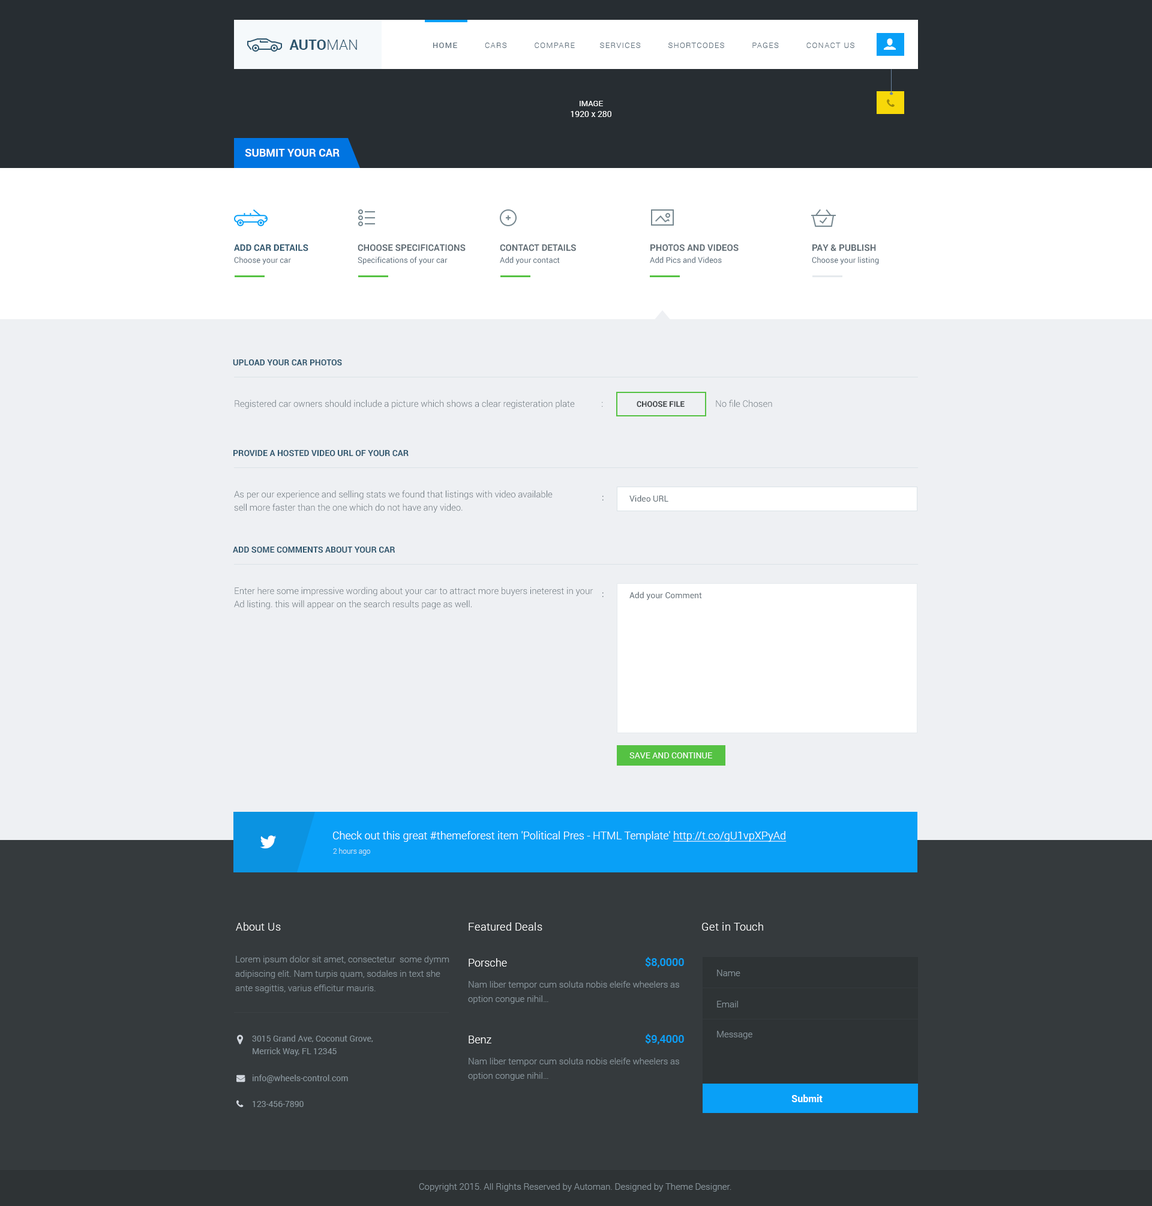
<style>
.page{position:relative;width:1152px;height:1206px;background:#eef0f3}
.page>*{position:absolute;margin:0}
.t1{font:14.4px "Roboto-Bold";color:#2e566e;text-transform:uppercase}
.t2{font:14.4px "Roboto-Light";color:#2e566e;text-transform:uppercase}
.t3{font:7.8px "Roboto-Light";letter-spacing:0.1em;color:#5d6e7b;text-transform:uppercase}
.t4{font:7.8px "Roboto-Regular";letter-spacing:0.1em;color:#5d6e7b;text-transform:uppercase}
.t5{font:8.4px/10.8px "Roboto-Regular";color:#ffffff}
.t6{font:7.8px/10.8px "Roboto-Regular";color:#ffffff}
.t7{font:10.8px "Roboto-Bold";color:#ffffff;text-transform:uppercase}
.t8{font:9px/12px "Roboto-Bold";color:#2e566e;text-transform:uppercase}
.t9{font:7.8px/12px "Roboto-Regular";color:#5d6e7b}
.t10{font:9px/12px "Roboto-Bold";color:#616d75;text-transform:uppercase}
.t11{font:8.4px "Roboto-Bold";color:#2e566e;text-transform:uppercase}
.t12{font:9px "Roboto-Light";color:#616d75}
.t13{font:7.8px "Roboto-Bold";color:#3e4346;text-transform:uppercase}
.t14{font:9px/13.2px "Roboto-Light";color:#616d75}
.t15{font:8.4px "Roboto-Regular";color:#616d75}
.t16{font:8.4px "Roboto-Regular";color:#ffffff;text-transform:uppercase}
.t17{font:10.8px "Roboto-Light";color:#ffffff}
.t18{font:10.8px "Roboto-Light";color:#ffffff;text-decoration:underline}
.t19{font:7.2px "Roboto-Light";color:#c3e1f4}
.t20{font:10.8px "Roboto-Light";letter-spacing:0.025em;color:#ffffff}
.t21{font:9px/14.4px "Roboto-Light";color:#88949b}
.t22{font:10.8px "Roboto-Medium";color:#09a0f7}
.t23{font:9px "Roboto-Light";color:#88949b}
.t24{font:8.4px/12.6px "Roboto-Regular";color:#88949b}
.t25{font:8.4px "Roboto-Regular";color:#88949b}
.t26{font:9.6px "Roboto-Bold";color:#ffffff}
</style>
<div class="page">
<p class="t1" style="left:289px;top:40px;width:68px;height:10px">Auto<span class="t2">man</span></p>
<p class="t3" style="left:433px;top:43px;width:421px;height:5px"><span class="t4">Home</span>          Cars          COMPARE         Services          Shortcodes          Pages          Conact us</p>
<p class="t5" style="left:571px;top:101px;width:40px;height:16px;text-align:center"><span class="t6">IMAGE<br></span>1920 x 280</p>
<p class="t7" style="left:245px;top:149px;width:95px;height:8px">Submit your car</p>
<p class="t8" style="left:234px;top:244px;width:74px;height:21px">ADD CAR DETAILS<br><span class="t9">Choose your car</span></p>
<p class="t9" style="left:358px;top:244px;width:108px;height:21px"><span class="t10">CHOOSE SPECIFICATIONS<br></span>Specifications of your car</p>
<p class="t9" style="left:500px;top:244px;width:76px;height:21px"><span class="t10">CONTACT DETAILS<br></span>Add your contact</p>
<p class="t9" style="left:650px;top:244px;width:89px;height:19px"><span class="t10">PHOTOS AND VIDEOS<br></span>Add Pics and Videos</p>
<p class="t9" style="left:812px;top:244px;width:67px;height:21px"><span class="t10">PAY &amp; PUBLISH<br></span>Choose your listing</p>
<p class="t11" style="left:233px;top:359px;width:109px;height:6px">Upload your car photos</p>
<p class="t12" style="left:235px;top:400px;width:368px;height:9px">Registered car owners should include a picture which shows a clear registeration plate  :</p>
<p class="t13" style="left:637px;top:401px;width:48px;height:6px">Choose file</p>
<p class="t12" style="left:716px;top:400px;width:56px;height:7px">No file Chosen</p>
<p class="t11" style="left:233px;top:450px;width:176px;height:7px">Provide a hosted video URL of your car</p>
<p class="t14" style="left:234px;top:490px;width:319px;height:23px">As per our experience and selling stats we found that listings with video available <br>sell more faster than the one which do not have any video.</p>
<p class="t15" style="left:602px;top:496px;width:2px;height:4px">:</p>
<p class="t15" style="left:629px;top:495px;width:39px;height:7px">Video URL</p>
<p class="t11" style="left:233px;top:547px;width:162px;height:6px">Add some comments about your car</p>
<p class="t14" style="left:234px;top:587px;width:359px;height:23px">Enter here some impressive wording about your car to attract more buyers ineterest in your<br>Ad listing. this will appear on the search results page as well.</p>
<p class="t15" style="left:602px;top:592px;width:2px;height:5px">:</p>
<p class="t15" style="left:629px;top:592px;width:73px;height:8px">Add your Comment</p>
<p class="t16" style="left:629px;top:752px;width:83px;height:6px">Save and Continue</p>
<p class="t17" style="left:333px;top:831px;width:454px;height:11px">Check out this great #themeforest item 'Political Pres - HTML Template' <span class="t18">http://t.co/gU1vpXPyAd</span></p>
<p class="t19" style="left:333px;top:848px;width:37px;height:8px">2 hours ago</p>
<p class="t20" style="left:236px;top:922px;width:45px;height:9px">About Us</p>
<p class="t20" style="left:469px;top:922px;width:73px;height:9px">Featured Deals</p>
<p class="t20" style="left:702px;top:922px;width:61px;height:9px">Get in Touch</p>
<p class="t21" style="left:235px;top:956px;width:214px;height:37px">Lorem ipsum dolor sit amet, consectetur  some dymm<br>adipiscing elit. Nam turpis quam, sodales in text she<br>ante sagittis, varius efficitur mauris.</p>
<p class="t17" style="left:469px;top:958px;width:38px;height:9px">Porsche</p>
<p class="t22" style="left:645px;top:957px;width:39px;height:11px">$8,0000</p>
<p class="t23" style="left:717px;top:970px;width:23px;height:6px">Name</p>
<p class="t21" style="left:468px;top:981px;width:211px;height:23px">Nam liber tempor cum soluta nobis eleife wheelers as<br>option congue nihil…</p>
<p class="t23" style="left:717px;top:1001px;width:21px;height:6px">Email</p>
<p class="t24" style="left:252px;top:1035px;width:121px;height:21px">3015 Grand Ave, Coconut Grove,<br>Merrick Way, FL 12345</p>
<p class="t17" style="left:469px;top:1036px;width:22px;height:7px">Benz</p>
<p class="t22" style="left:645px;top:1034px;width:39px;height:11px">$9,4000</p>
<p class="t23" style="left:717px;top:1031px;width:35px;height:8px">Message</p>
<p class="t21" style="left:468px;top:1058px;width:211px;height:23px">Nam liber tempor cum soluta nobis eleife wheelers as<br>option congue nihil…</p>
<p class="t25" style="left:253px;top:1075px;width:95px;height:8px">info@wheels-control.com</p>
<p class="t26" style="left:791px;top:1094px;width:32px;height:8px">Submit</p>
<p class="t25" style="left:253px;top:1101px;width:51px;height:6px">123-456-7890</p>
<p class="t23" style="left:419px;top:1183px;width:312px;height:9px">Copyright 2015. All Rights Reserved by Automan. Designed by Theme Designer.</p>
</div>
